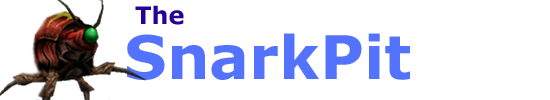
<style>
.page{position:relative;width:550px;height:100px;background:#ffffff}
.page>*{position:absolute;margin:0}
.t1{font:24px "Verdana-Bold";color:#270096}
.t2{font:60px "Verdana-Bold";color:#5373ff}
</style>
<div class="page">
<p class="t1" style="left:135px;top:5px;width:49px;height:20px">The</p>
<p class="t2" style="left:127px;top:33px;width:283px;height:47px">SnarkPit</p>
</div>
